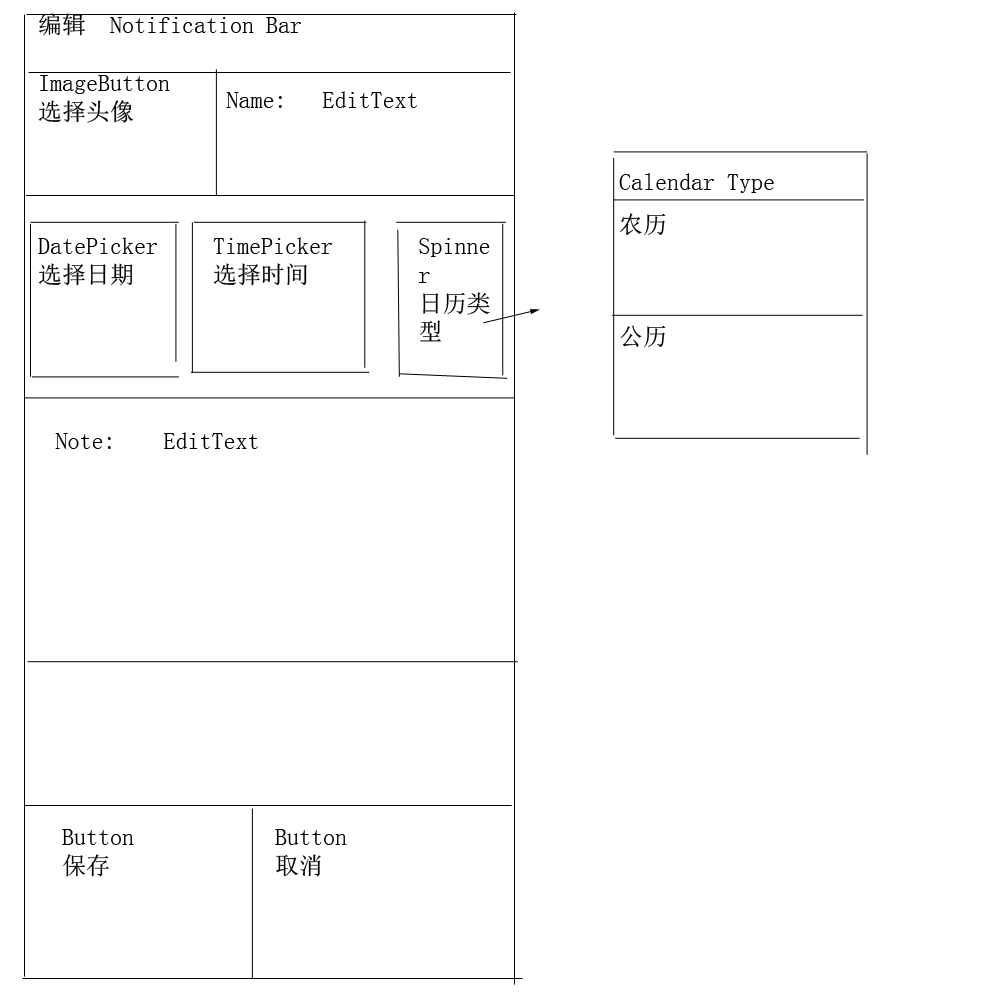
<style>
.page{position:relative;width:1000px;height:1000px;background:#ffffff}
.page>*{position:absolute;margin:0}
.t1{font:24px "SimSun";color:#000000}
</style>
<div class="page">
<p class="t1" style="left:39px;top:13px;width:262px;height:23px">编辑  Notification Bar</p>
<p class="t1" style="left:38px;top:75px;width:132px;height:48px">ImageButton<br>选择头像</p>
<p class="t1" style="left:226px;top:91px;width:191px;height:17px">Name:   EditText</p>
<p class="t1" style="left:619px;top:173px;width:155px;height:20px">Calendar Type</p>
<p class="t1" style="left:619px;top:213px;width:47px;height:23px">农历</p>
<p class="t1" style="left:38px;top:237px;width:119px;height:49px">DatePicker<br>选择日期</p>
<p class="t1" style="left:213px;top:237px;width:119px;height:49px">TimePicker<br>选择时间</p>
<p class="t1" style="left:419px;top:238px;width:71px;height:104px">Spinner<br>日历类型</p>
<p class="t1" style="left:620px;top:325px;width:46px;height:23px">公历</p>
<p class="t1" style="left:55px;top:432px;width:203px;height:17px">Note:    EditText</p>
<p class="t1" style="left:62px;top:829px;width:72px;height:48px">Button<br>保存</p>
<p class="t1" style="left:275px;top:829px;width:72px;height:48px">Button<br>取消</p>
</div>
